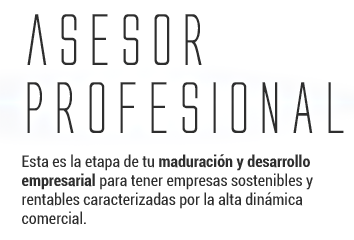
<style>
.page{position:relative;width:354px;height:240px;background:#ffffff}
.page>*{position:absolute;margin:0}
.t1{font:67.6px/67.6px "AlienLeague";color:#2e2e2e}
.t2{font:16px "Roboto-Condensed";color:#2e2e2e}
.t3{font:16px "Roboto-BoldCondensed";color:#2e2e2e}
</style>
<div class="page">
<p class="t1" style="left:27px;top:14px;width:317px;height:119px">asesor <br>PROFESiONAL</p>
<p class="t2" style="left:22px;top:154px;width:291px;height:71px">Esta es la etapa de tu <span class="t3">maduración y desarrollo empresarial </span>para tener empresas sostenibles y rentables caracterizadas por la alta dinámica comercial.</p>
</div>
